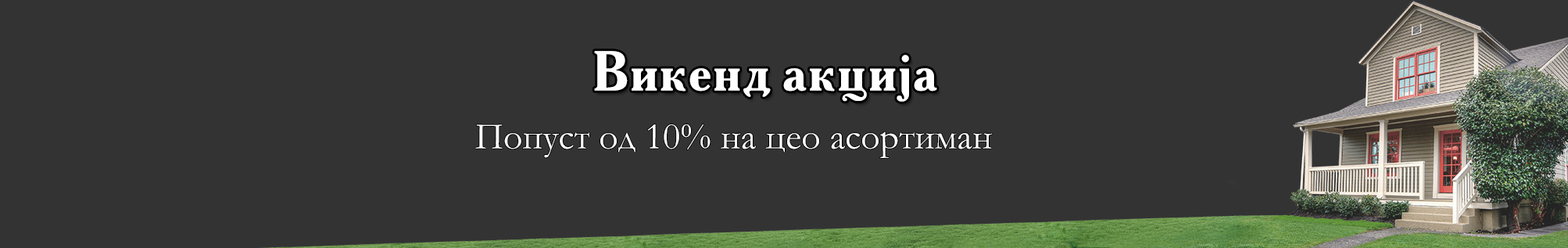
<style>
.page{position:relative;width:1568px;height:248px;background:#333333}
.page>*{position:absolute;margin:0}
.t1{font:56.3px "AkademieAlte";color:#ffffff}
.t2{font:37.5px "Garamond";color:#ffffff}
</style>
<div class="page">
<p class="t1" style="left:594px;top:51px;width:343px;height:51px">Викенд акцијa</p>
<p class="t2" style="left:475px;top:124px;width:518px;height:34px">Попуст од 10% на цео асортиман</p>
</div>
